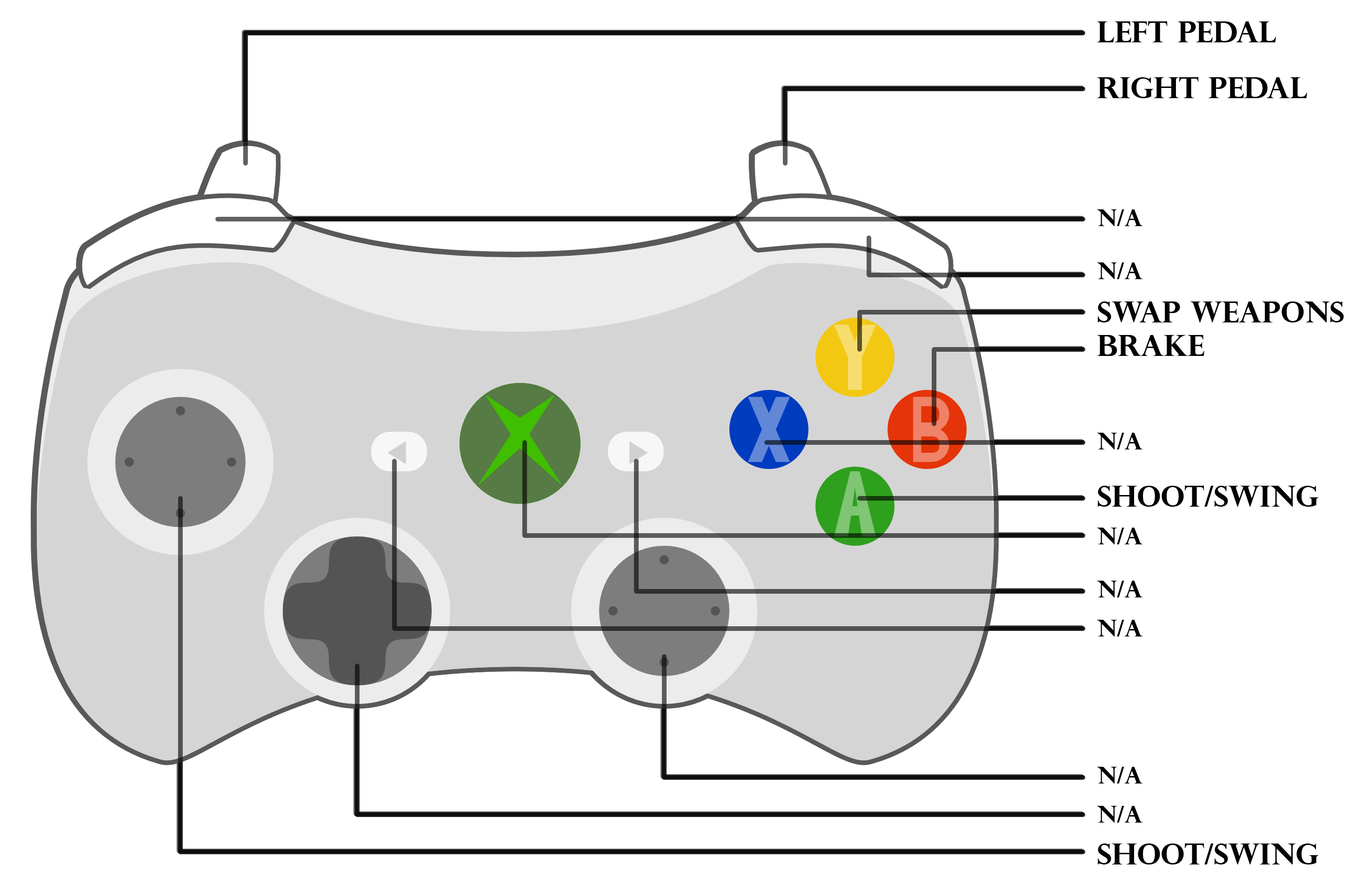
<style>
.page{position:relative;width:1349px;height:884px;background:#ffffff}
.page>*{position:absolute;margin:0}
.t1{font:29.1px "PerpetuaTitlingMT-Bold";color:#020300}
.t2{font:23.3px "PerpetuaTitlingMT-Bold";color:#020300}
</style>
<div class="page">
<p class="t1" style="left:1097px;top:21px;width:179px;height:21px">Left Pedal</p>
<p class="t1" style="left:1097px;top:77px;width:210px;height:21px">Right Pedal</p>
<p class="t2" style="left:1097px;top:209px;width:46px;height:17px">N/A</p>
<p class="t2" style="left:1097px;top:262px;width:46px;height:17px">N/A</p>
<p class="t1" style="left:1097px;top:301px;width:247px;height:21px">Swap Weapons</p>
<p class="t1" style="left:1097px;top:335px;width:107px;height:21px">Brake</p>
<p class="t2" style="left:1097px;top:433px;width:46px;height:16px">N/A</p>
<p class="t1" style="left:1097px;top:485px;width:221px;height:22px">Shoot/swing</p>
<p class="t2" style="left:1097px;top:528px;width:46px;height:16px">N/A</p>
<p class="t2" style="left:1097px;top:581px;width:46px;height:16px">N/A</p>
<p class="t2" style="left:1097px;top:620px;width:46px;height:16px">N/A</p>
<p class="t2" style="left:1097px;top:767px;width:46px;height:16px">N/A</p>
<p class="t2" style="left:1097px;top:806px;width:46px;height:16px">N/A</p>
<p class="t1" style="left:1097px;top:843px;width:221px;height:21px">Shoot/swing</p>
</div>
